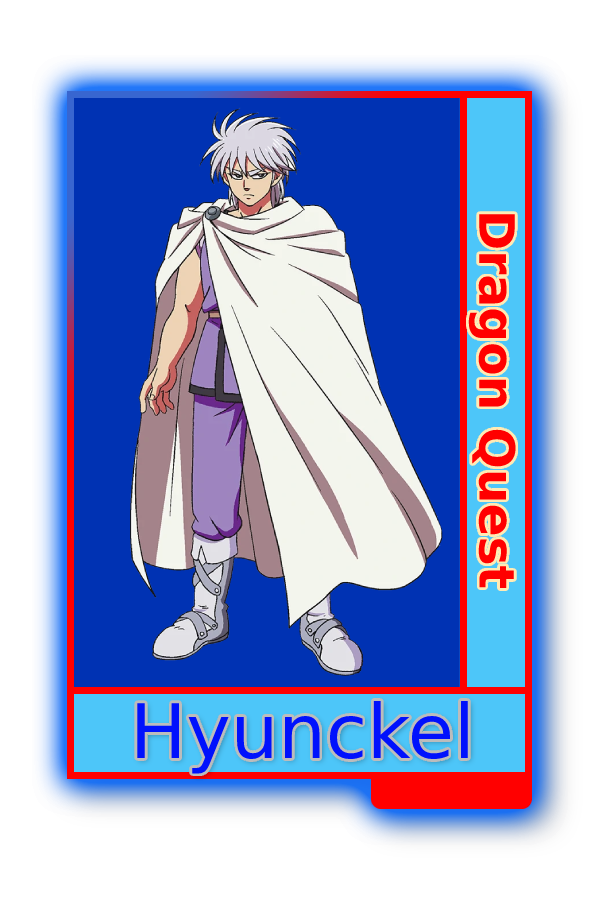
<style>
.page{position:relative;width:600px;height:900px;background:#0032b3}
.page>*{position:absolute;margin:0}
.t1{font:48.8px "MADETOMMY-Bold";color:#ff0000}
.t2{font:75px "CoolveticaRg-Regular";color:#0011fd}
</style>
<div class="page">
<p class="t1" style="left:468px;top:214px;width:48px;height:374px;rotate:90deg">Dragon Quest</p>
<p class="t2" style="left:137px;top:701px;width:331px;height:73px">Hyunckel</p>
</div>
